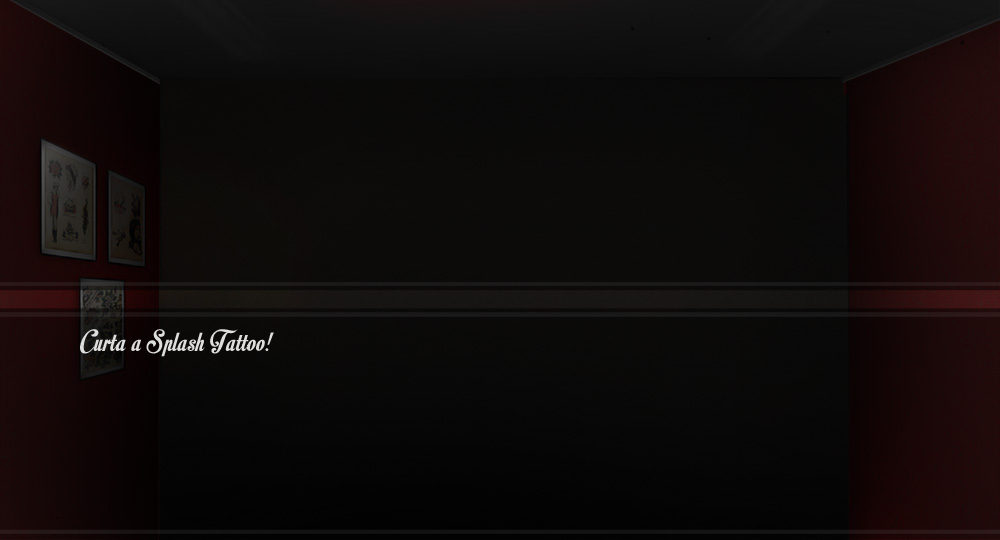
<style>
.page{position:relative;width:1000px;height:540px}
.page>*{position:absolute;margin:0}
.t1{font:29.8px "MotionPicturePersonalUse";letter-spacing:0.015em;color:#dfdede}
</style>
<div class="page">
<p class="t1" style="left:80px;top:329px;width:194px;height:28px">Curta a Splash Tattoo!</p>
</div>
